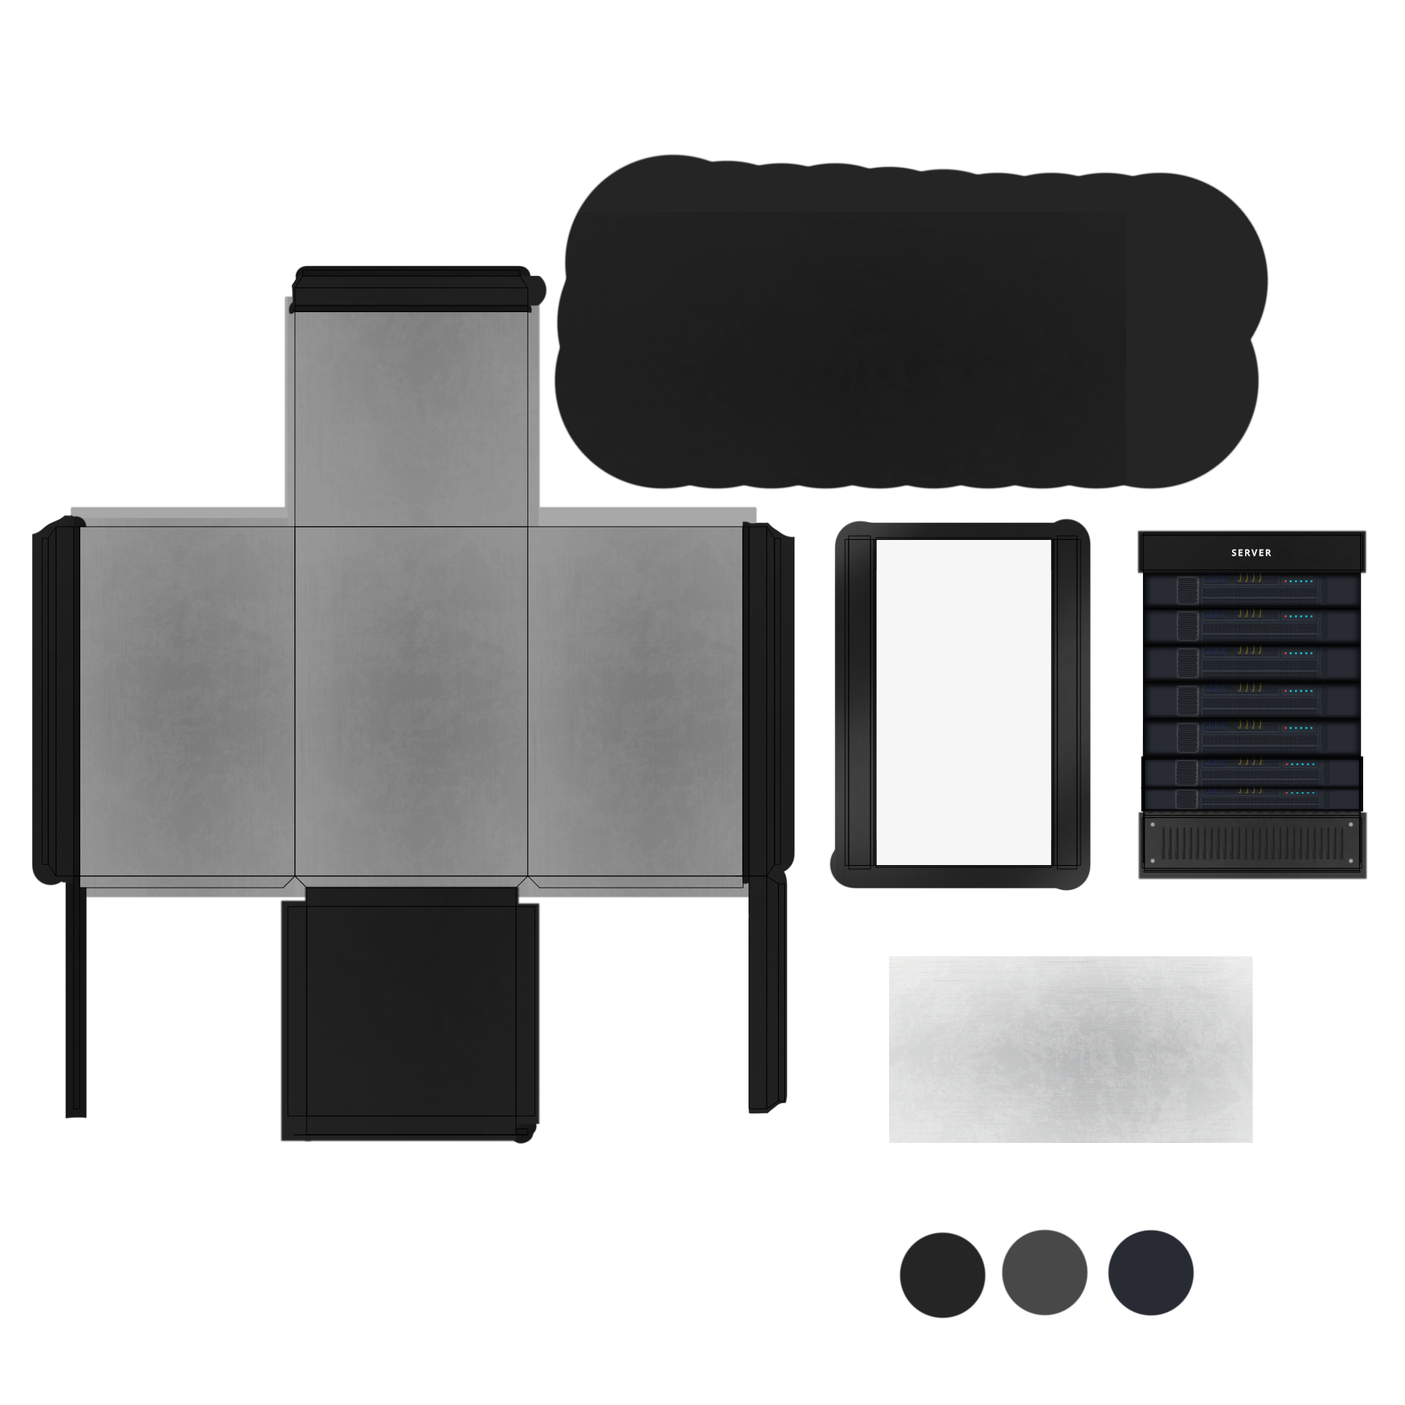
<style>
.page{position:relative;width:1405px;height:1405px;background:#ffffff}
.page>*{position:absolute;margin:0}
.t1{font:9px "NotoSans-SemiBold";letter-spacing:0.16em;color:#ffffff;text-transform:uppercase}
</style>
<div class="page">
<p class="t1" style="left:1232px;top:549px;width:40px;height:8px">Server</p>
</div>
